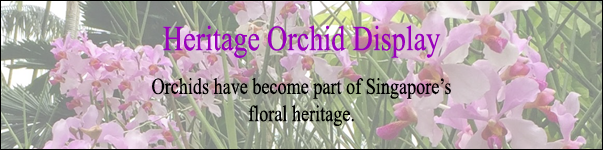
<style>
.page{position:relative;width:603px;height:150px}
.page>*{position:absolute;margin:0}
.t1{font:35.3px "TimesNewRomanPSMT";color:#9900bb;scale:0.8 1}
.t2{font:22.7px "TimesNewRomanPSMT";color:#000000;scale:0.8 1}
</style>
<div class="page">
<p class="t1" style="left:163px;top:25px;width:278px;height:33px">Heritage Orchid Display</p>
<p class="t2" style="left:152px;top:78px;width:299px;height:48px;text-align:center">Orchids have become part of Singapore’s<br>floral heritage.</p>
</div>
